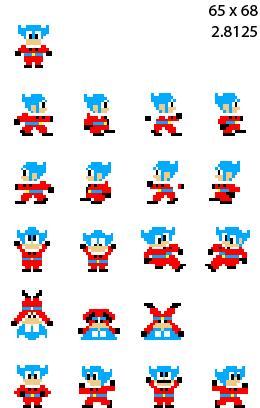
<style>
.page{position:relative;width:260px;height:408px;background:#ffffff}
.page>*{position:absolute;margin:0}
.t1{font:17px "MyriadPro-Regular";color:#000000}
</style>
<div class="page">
<p class="t1" style="left:209px;top:5px;width:49px;height:32px;text-align:right">65 x 68<br>2.8125</p>
</div>
